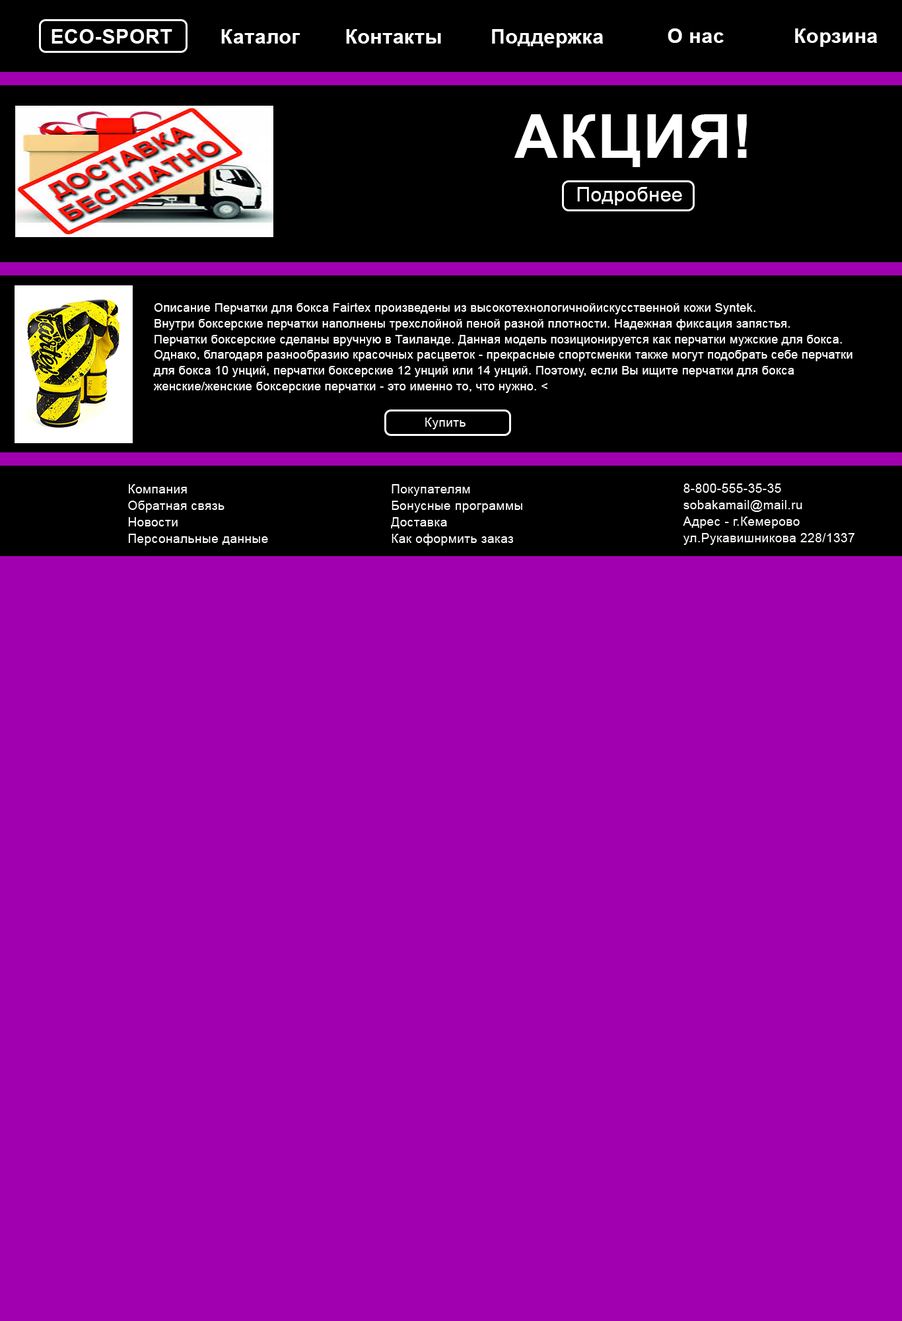
<style>
.page{position:relative;width:902px;height:1321px;background:#a100b0}
.page>*{position:absolute;margin:0}
.t1{font:19.8px "Arial-BoldMT";letter-spacing:0.025em;color:#ffffff}
.t2{font:60.5px "Arial-BoldMT";letter-spacing:0.025em;color:#ffffff}
.t3{font:19.8px "ArialMT";letter-spacing:0.025em;color:#ffffff}
.t4{font:11.9px/15.6px "ArialMT";letter-spacing:0.025em;color:#ffffff}
</style>
<div class="page">
<p class="t1" style="left:221px;top:29px;width:79px;height:15px">Каталог</p>
<p class="t1" style="left:346px;top:29px;width:95px;height:15px">Контакты</p>
<p class="t1" style="left:492px;top:29px;width:112px;height:19px">Поддержка</p>
<p class="t1" style="left:668px;top:28px;width:56px;height:15px">О нас</p>
<p class="t1" style="left:795px;top:28px;width:83px;height:19px">Корзина</p>
<p class="t2" style="left:515px;top:114px;width:232px;height:53px">АКЦИЯ!</p>
<p class="t3" style="left:577px;top:187px;width:105px;height:18px">Подробнее</p>
<p class="t4" style="left:153px;top:303px;width:700px;height:90px">Описание Перчатки для бокса Fairtex произведены из высокотехнологичнойискусственной кожи Syntek. <br>Внутри боксерские перчатки наполнены трехслойной пеной разной плотности. Надежная фиксация запястья. <br>Перчатки боксерские сделаны вручную в Таиланде. Данная модель позиционируется как перчатки мужские для бокса. <br>Однако, благодаря разнообразию красочных расцветок - прекрасные спортсменки также могут подобрать себе перчатки <br>для бокса 10 унций, перчатки боксерские 12 унций или 14 унций. Поэтому, если Вы ищите перчатки для бокса <br>женские/женские боксерские перчатки - это именно то, что нужно. &lt;</p>
</div>
